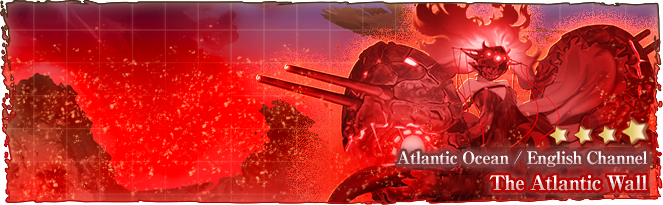
<style>
.page{position:relative;width:663px;height:205px}
.page>*{position:absolute;margin:0}
.t1{font:17px "RyuminPro-ExBold";letter-spacing:-0.04em}
.t2{font:20px "RyuminPro-ExBold";letter-spacing:-0.04em}
</style>
<div class="page">
<p class="t1" style="left:397px;top:151px;width:251px;height:16px">Atlantic Ocean / English Channel</p>
<p class="t2" style="left:489px;top:175px;width:158px;height:16px">The Atlantic Wall</p>
</div>
